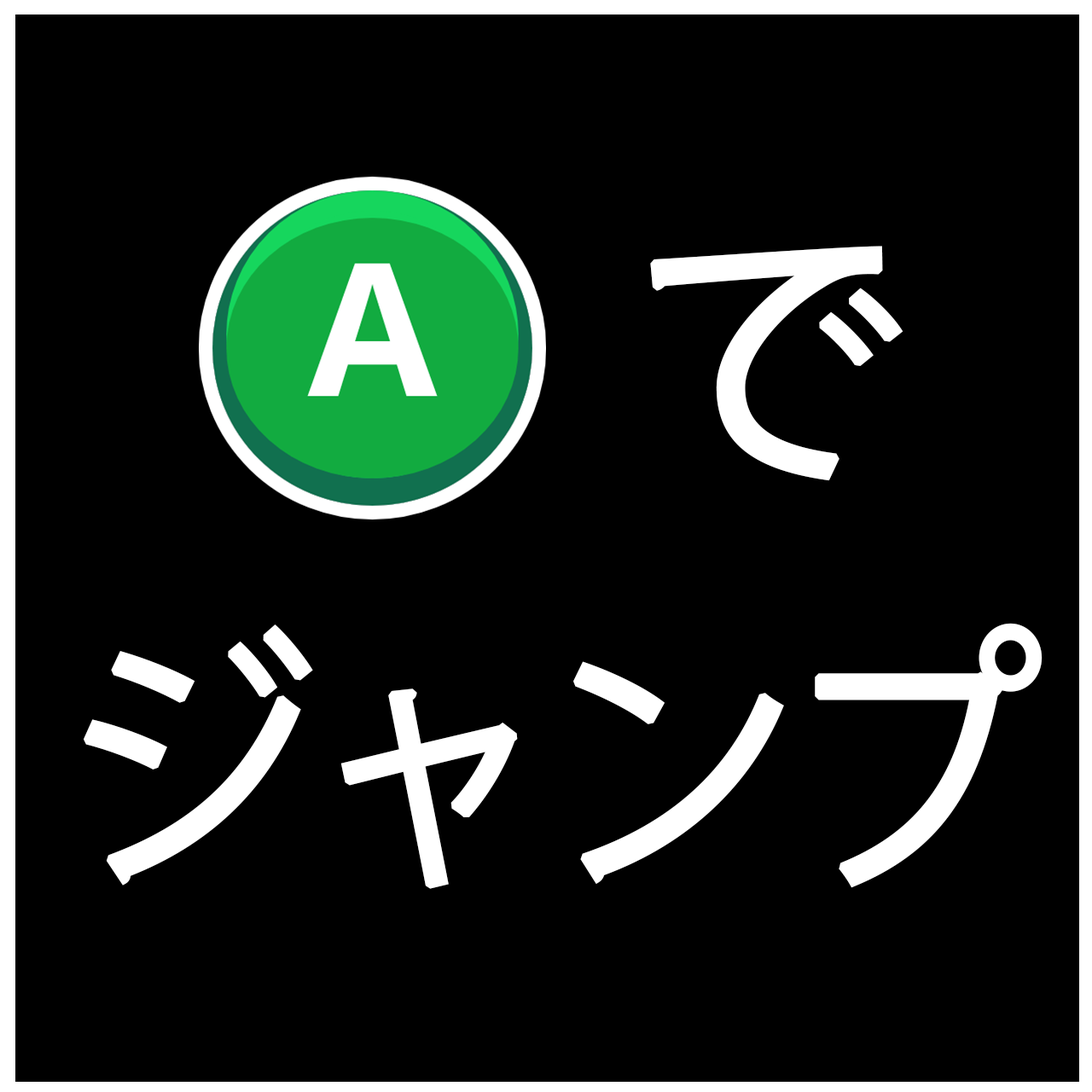
<style>
.page{position:relative;width:1092px;height:1092px;background:#000000}
.page>*{position:absolute;margin:0}
.t1{font:273px "KozGoPr6N-Regular";letter-spacing:-0.07em;color:#ffffff;font-weight:bold}
.t2{font:275.6px "KozGoPr6N-Regular";letter-spacing:-0.07em;color:#ffffff;font-weight:bold;scale:0.91 1}
</style>
<div class="page">
<p class="t1" style="left:650px;top:246px;width:253px;height:235px">で</p>
<p class="t2" style="left:84px;top:623px;width:959px;height:266px">ジャンプ</p>
</div>
